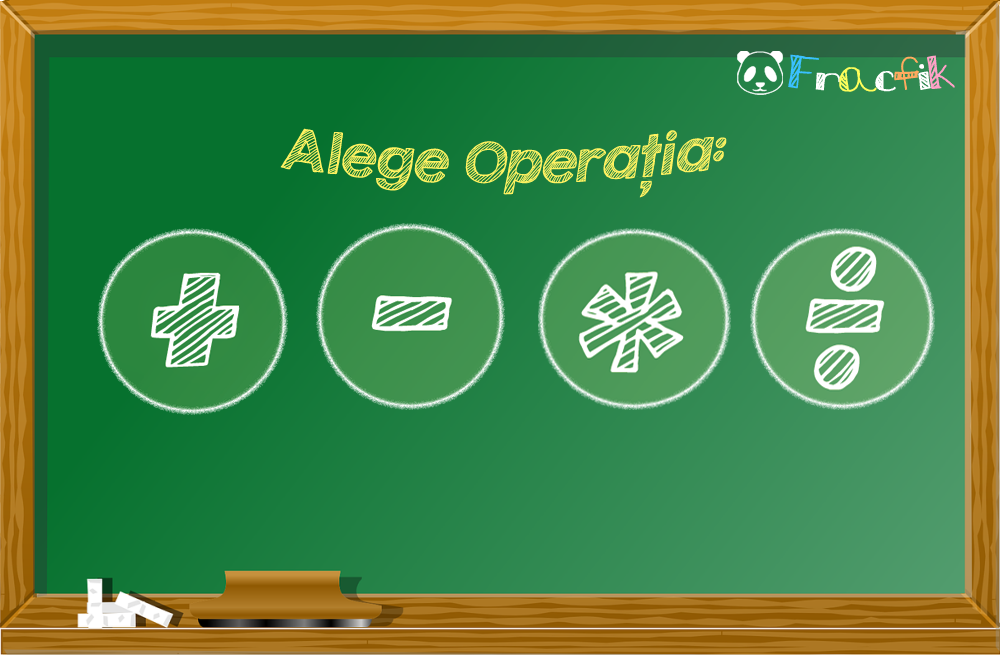
<style>
.page{position:relative;width:1000px;height:655px}
.page>*{position:absolute;margin:0}
.t1{font:33.3px "Stripes-and-bubbles";letter-spacing:-0.075em;color:#3ac0ff}
.t2{font:33.3px "Stripes-and-bubbles";letter-spacing:-0.075em;color:#ffffff}
.t3{font:33.3px "Stripes-and-bubbles";letter-spacing:-0.075em;color:#fefe5a}
.t4{font:33.3px "Stripes-and-bubbles";letter-spacing:-0.075em;color:#ffaa5f}
.t5{font:33.3px "Stripes-and-bubbles";letter-spacing:-0.075em;color:#ffa1c7}
.t6{font:50.7px "KGSecondChancesSketch";color:#fff261;font-style:italic}
</style>
<div class="page">
<p class="t1" style="left:788px;top:54px;width:167px;height:38px">F<span class="t2">r</span><span class="t3">a</span><span class="t2">c</span><span class="t4">f</span><span class="t2">i</span><span class="t5">k</span></p>
<p class="t6" style="left:280px;top:128px;width:447px;height:67px">Alege Operatia:</p>
</div>
